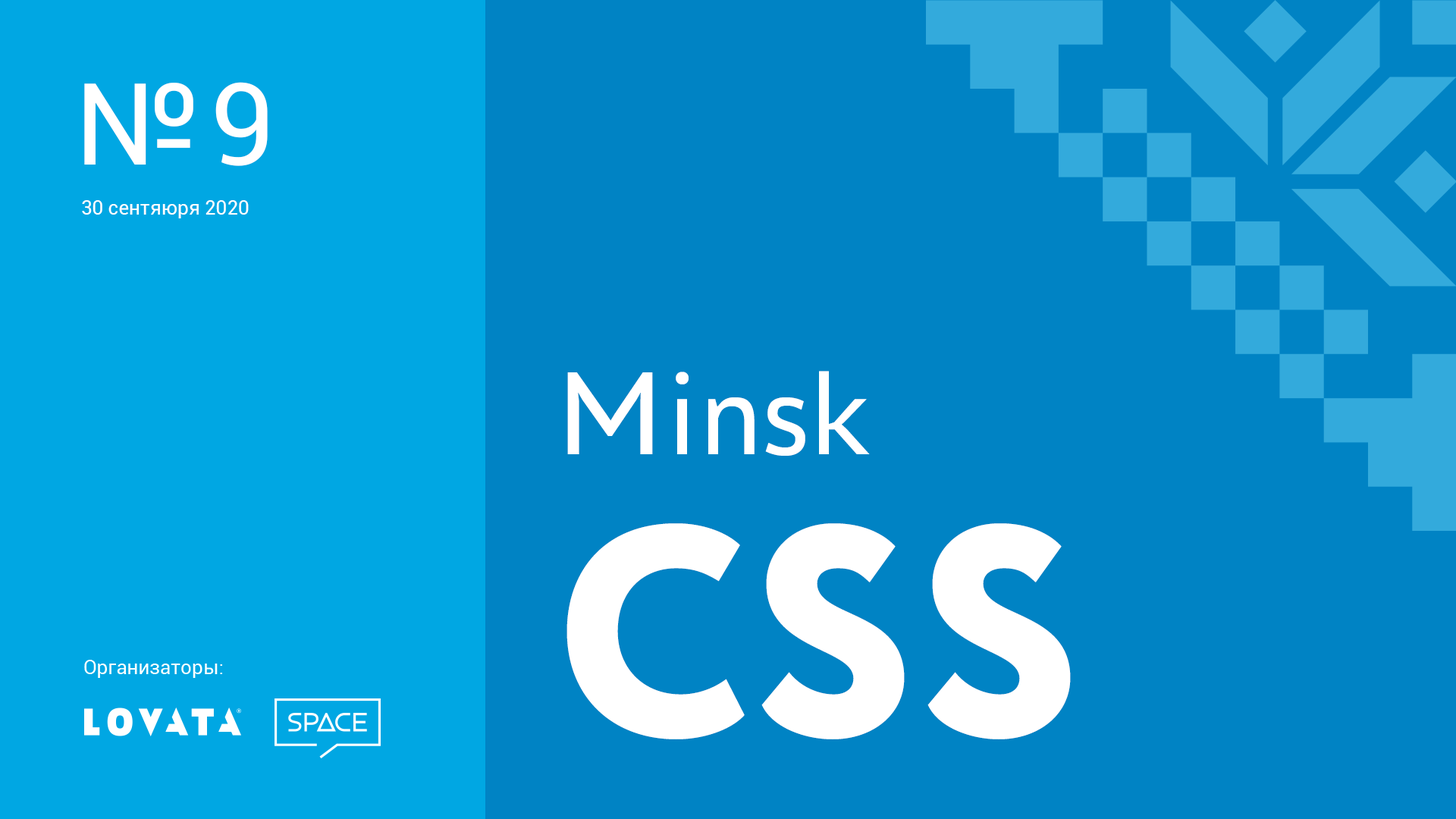
<style>
.page{position:relative;width:1456px;height:819px;background:#0083c4}
.page>*{position:absolute;margin:0}
.t1{font:113.7px "Roboto-Regular";color:#ffffff}
.t2{font:19.7px "Roboto-Regular";color:#ffffff}
.t3{font:123.6px "PTAstraSans-Regular";color:#ffffff}
.t4{font:298px "Circe-ExtraBold";color:#ffffff}
</style>
<div class="page">
<p class="t1" style="left:84px;top:82px;width:184px;height:84px">№ 9</p>
<p class="t2" style="left:82px;top:200px;width:167px;height:18px">30 сентяюря 2020</p>
<p class="t3" style="left:567px;top:371px;width:303px;height:85px">Minsk</p>
<p class="t4" style="left:566px;top:523px;width:505px;height:216px">CSS</p>
<p class="t2" style="left:84px;top:660px;width:138px;height:18px">Организаторы:</p>
</div>
